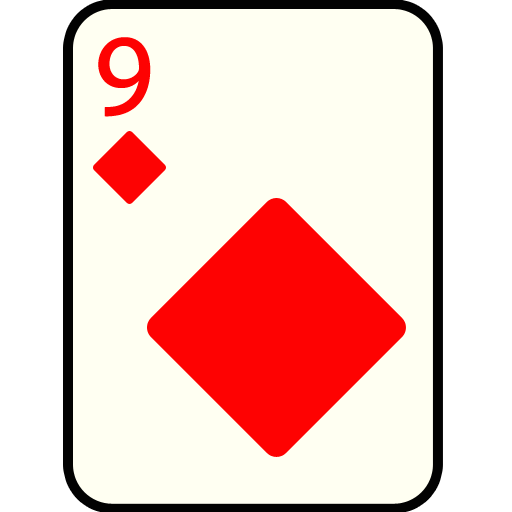
<style>
.page{position:relative;width:512px;height:512px;background:#fffff2}
.page>*{position:absolute;margin:0}
.t1{font:200px "MyriadPro-Regular";letter-spacing:-0.05em;color:#fd0202;font-variant:small-caps;font-weight:bold}
</style>
<div class="page">
<p class="t1" style="left:98px;top:37px;width:53px;height:80px">9</p>
</div>
